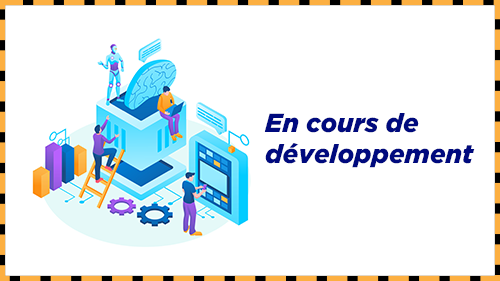
<style>
.page{position:relative;width:500px;height:281px;background:#ffffff}
.page>*{position:absolute;margin:0}
.t1{font:26px "Gotham-BlackItalic";color:#000a7e}
</style>
<div class="page">
<p class="t1" style="left:264px;top:113px;width:211px;height:55px">En cours de<br>développement</p>
</div>
